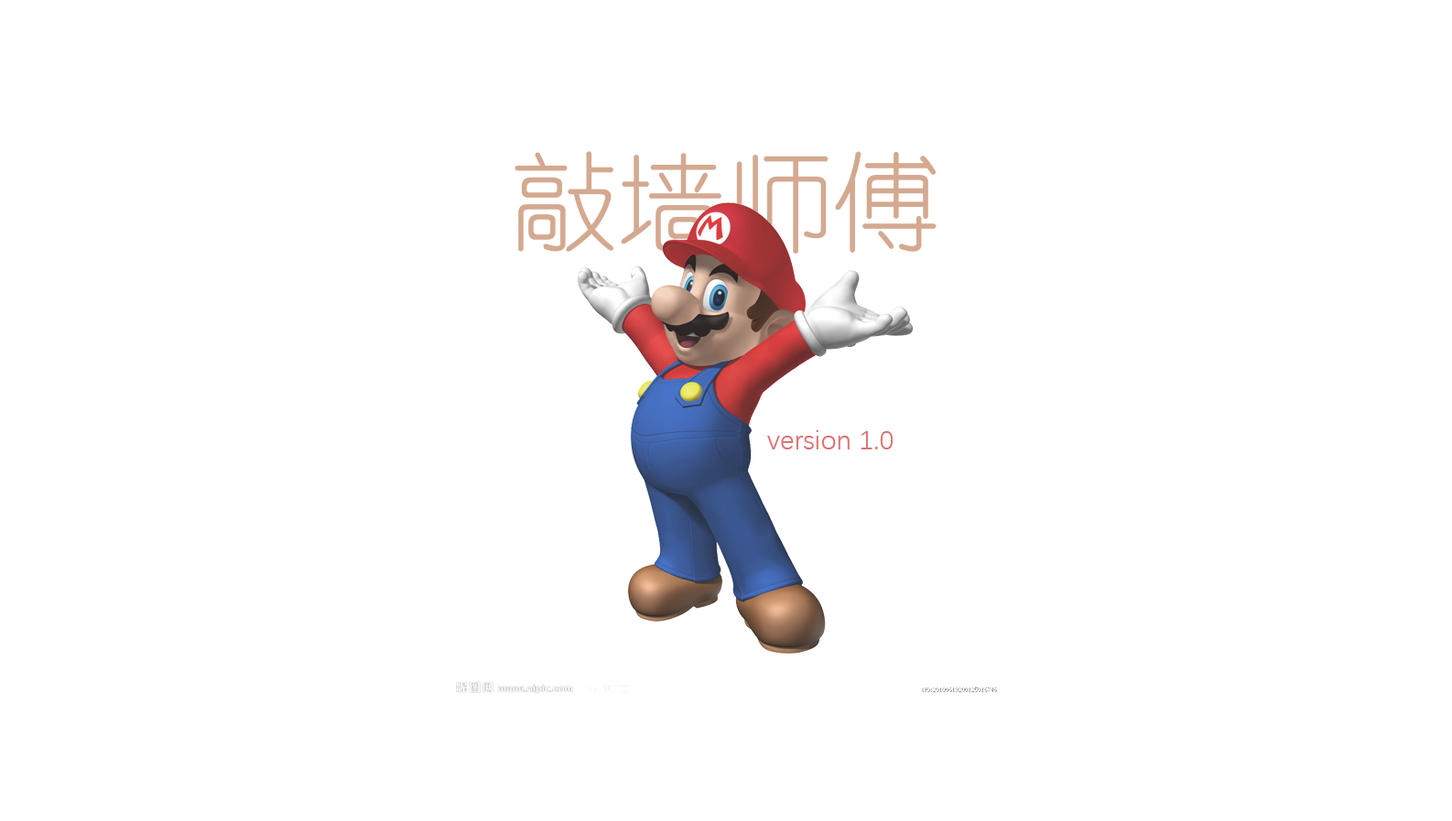
<style>
.page{position:relative;width:1452px;height:821px;background:#ffffff}
.page>*{position:absolute;margin:0}
.t1{font:107.6px "YouYuan";color:#d4a990}
.t2{font:27.5px "DengXian";color:#da7373}
</style>
<div class="page">
<p class="t1" style="left:515px;top:151px;width:422px;height:103px">敲墙师傅</p>
<p class="t2" style="left:767px;top:430px;width:127px;height:20px">version 1.0</p>
</div>
